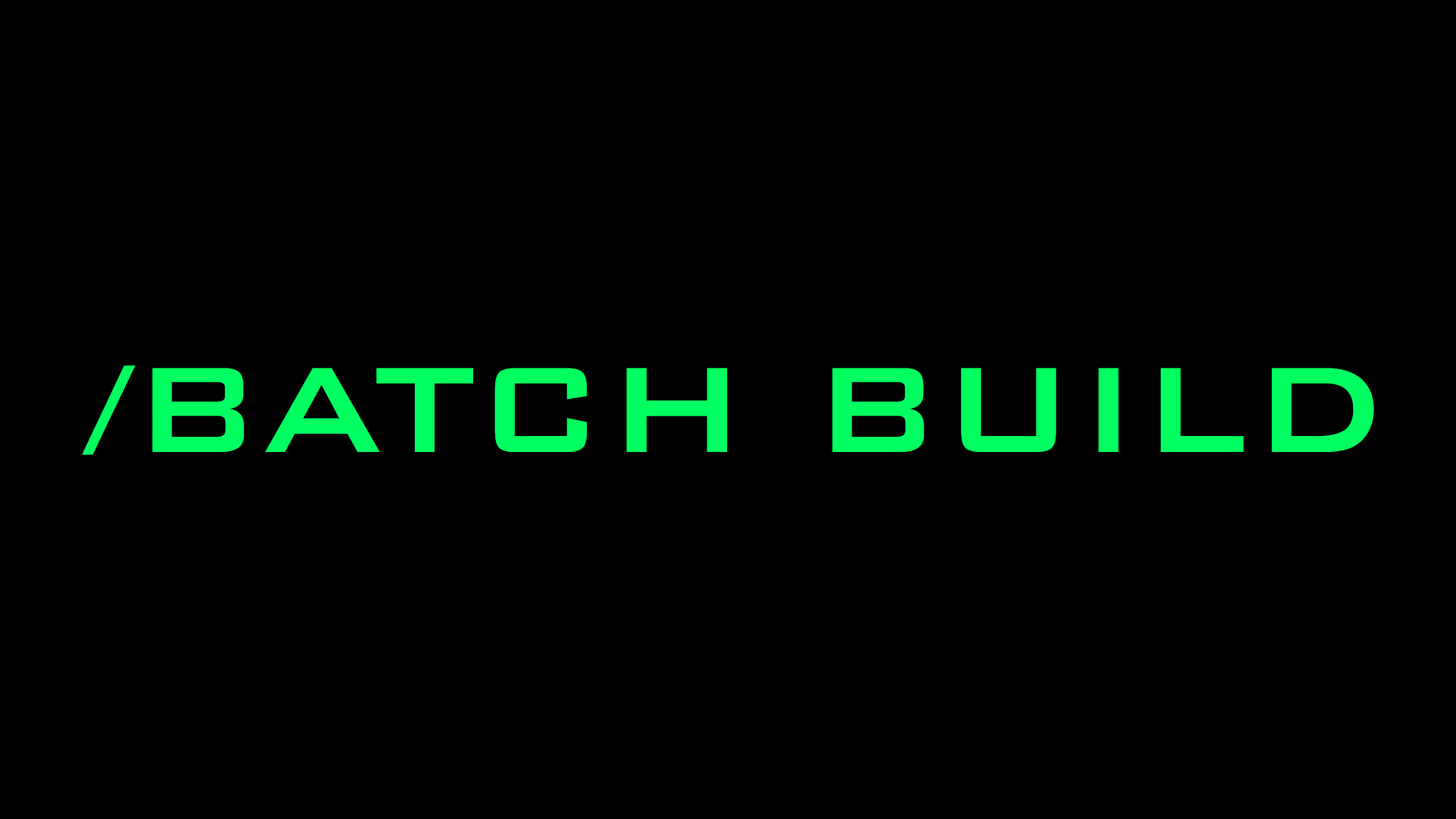
<style>
.page{position:relative;width:1456px;height:819px;background:#000000}
.page>*{position:absolute;margin:0}
.t1{font:162.3px "BankGothicBT-Medium";color:#00ff60}
</style>
<div class="page">
<p class="t1" style="left:82px;top:366px;width:1292px;height:89px">/BATCH BUILD</p>
</div>
